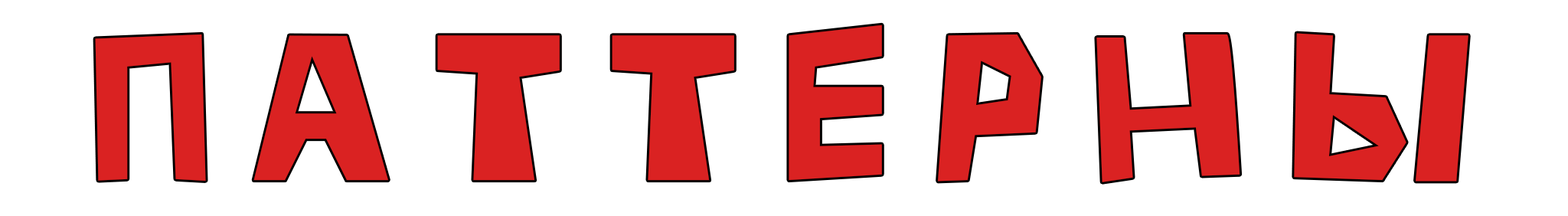
<style>
.page{position:relative;width:1568px;height:216px;background:#ffffff}
.page>*{position:absolute;margin:0}
.t1{font:211.5px "ZeroCool";letter-spacing:0.2em;color:#da2222}
</style>
<div class="page">
<p class="t1" style="left:95px;top:24px;width:1373px;height:158px">Паттерны</p>
</div>
